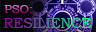
<style>
.page{position:relative;width:96px;height:32px}
.page>*{position:absolute;margin:0}
.t1{font:12px "BookmanOldStyle"}
.t2{font:14px "BookmanOldStyle"}
</style>
<div class="page">
<p class="t1" style="left:4px;top:5px;width:28px;height:8px">PSO:</p>
<p class="t2" style="left:3px;top:18px;width:88px;height:10px">RESILIENCE</p>
</div>
